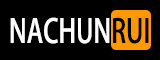
<style>
.page{position:relative;width:160px;height:60px;background:#000000}
.page>*{position:absolute;margin:0}
.t1{font:32.5px "AdobeHeitiStd-Regular";color:#ffffff;scale:0.77 1}
.t2{font:32.5px "AdobeHeitiStd-Regular";color:#000000;scale:0.77 1}
</style>
<div class="page">
<p class="t1" style="left:10px;top:17px;width:139px;height:27px">NACHUN<span class="t2">RUI</span></p>
</div>
